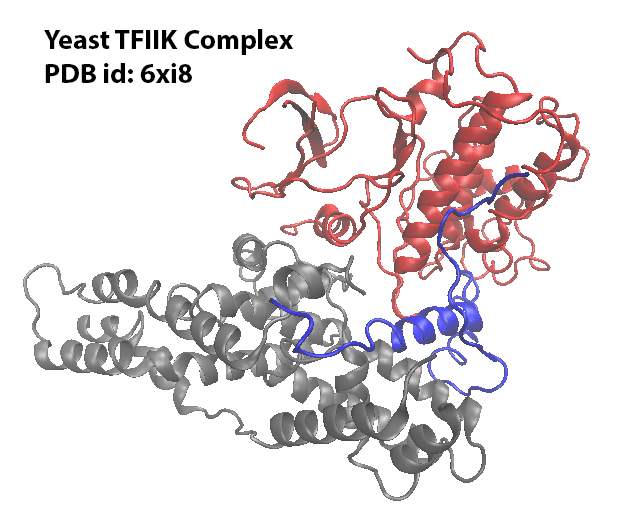
<style>
.page{position:relative;width:622px;height:523px;background:#ffffff}
.page>*{position:absolute;margin:0}
.t1{font:28px "MyriadPro-Bold";color:#000000}
</style>
<div class="page">
<p class="t1" style="left:44px;top:29px;width:250px;height:54px">Yeast TFIIK Complex<br>PDB id: 6xi8</p>
</div>
